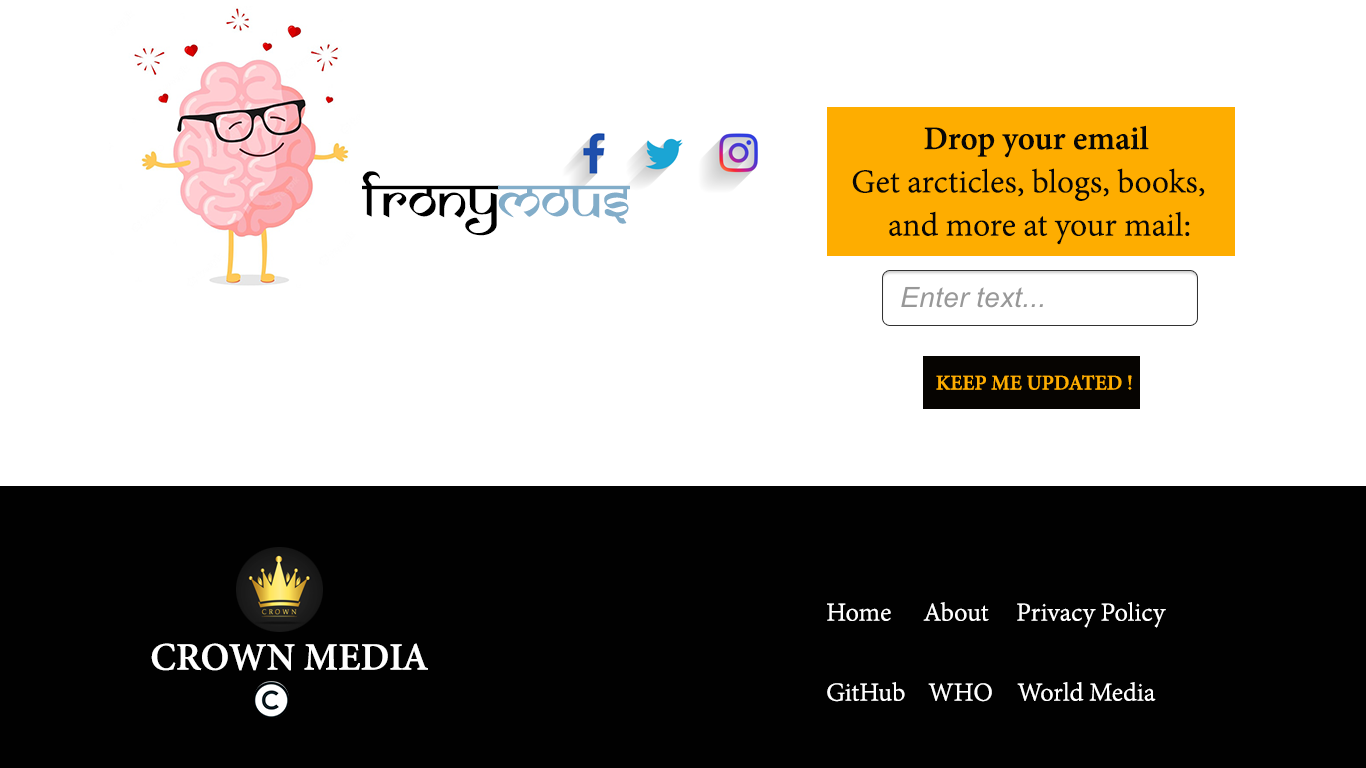
<style>
.page{position:relative;width:1366px;height:768px;background:#ffffff}
.page>*{position:absolute;margin:0}
.t1{font:36px "AdobeDevanagari-Regular";color:#070706}
.t2{font:36px "AdobeDevanagari-Bold";color:#070706}
.t3{font:57.4px "SamarkanNormal";color:#000000}
.t4{font:57.4px "SamarkanNormal";color:#82adc9}
.t5{font:22.8px "AdobeDevanagari-Bold";color:#fead00}
.t6{font:28.2px "AdobeDevanagari-Regular";color:#ffffff}
.t7{font:42.4px "AdobeDevanagari-Bold";color:#ffffff}
</style>
<div class="page">
<p class="t1" style="left:852px;top:125px;width:353px;height:120px"><span class="t2">  Drop your email<br></span>Get arcticles, blogs, books,<br>     and more at your mail:</p>
<p class="t3" style="left:362px;top:171px;width:268px;height:65px">frony<span class="t4">mous</span></p>
<p class="t5" style="left:936px;top:375px;width:196px;height:15px">KEEP ME UPDATED !</p>
<p class="t6" style="left:827px;top:603px;width:64px;height:18px">Home</p>
<p class="t6" style="left:923px;top:602px;width:66px;height:19px">About</p>
<p class="t6" style="left:1017px;top:602px;width:149px;height:26px">Privacy Policy</p>
<p class="t7" style="left:151px;top:643px;width:277px;height:28px">CROWN MEDIA</p>
<p class="t6" style="left:827px;top:682px;width:78px;height:20px">GitHub</p>
<p class="t6" style="left:928px;top:683px;width:64px;height:19px">WHO</p>
<p class="t6" style="left:1017px;top:682px;width:139px;height:19px">World Media</p>
</div>
